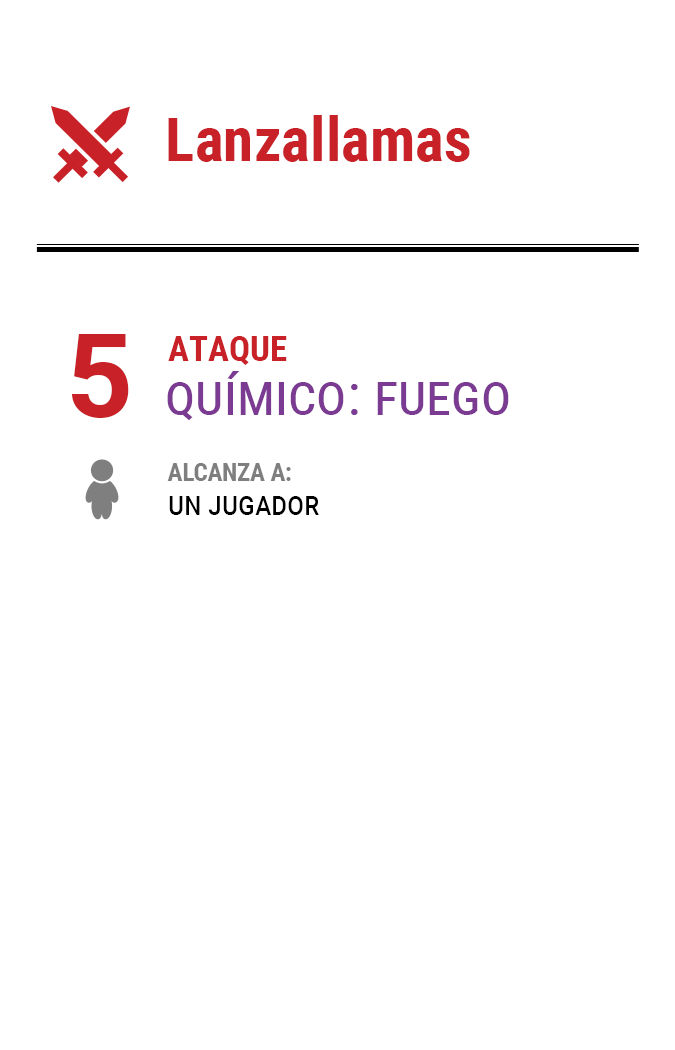
<style>
.page{position:relative;width:675px;height:1050px;background:#ffffff}
.page>*{position:absolute;margin:0}
.t1{font:61.2px "RobotoCondensed-Bold";color:#c82127}
.t2{font:116.7px "Roboto-Bold";letter-spacing:-0.16em;color:#c82127}
.t3{font:35px "RobotoCondensed-Bold";color:#c82127}
.t4{font:58.3px "RobotoCondensed-Regular";color:#7c3b92;font-variant:small-caps}
.t5{font:25px/33.3px "RobotoCondensed-Bold";letter-spacing:-0.01em;color:#7f7f7f}
.t6{font:33.3px/33.3px "RobotoCondensed-Regular";letter-spacing:-0.01em;color:#000000;font-variant:small-caps}
</style>
<div class="page">
<p class="t1" style="left:168px;top:115px;width:302px;height:47px">Lanzallamas</p>
<p class="t2" style="left:72px;top:334px;width:57px;height:84px">5</p>
<p class="t3" style="left:168px;top:336px;width:119px;height:29px">ATAQUE</p>
<p class="t4" style="left:167px;top:371px;width:342px;height:50px">químico: fuego</p>
<p class="t5" style="left:167px;top:463px;width:152px;height:52px">ALCANZA A:<br><span class="t6">un jugador</span></p>
</div>
